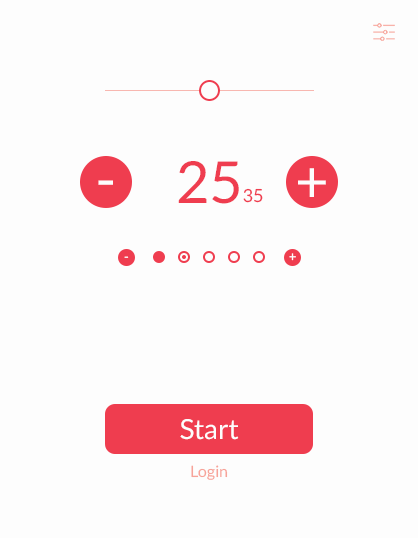
<style>
.page{position:relative;width:418px;height:538px;background:#fdfdfd}
.page>*{position:absolute;margin:0}
.t1{font:58px "Lato-Regular";color:#ef3d4f}
.t2{font:58px "Lato-Regular";color:#fdfdfd}
.t3{font:18px "Lato-Regular";color:#ef3d4f}
.t4{font:12.9px "Lato-Regular";color:#fdfdfd}
.t5{font:27.7px "Lato-Regular";color:#fdfdfd}
.t6{font:15.8px "Lato-Regular";color:#f7a399}
</style>
<div class="page">
<p class="t1" style="left:178px;top:161px;width:61px;height:43px">25</p>
<p class="t2" style="left:298px;top:168px;width:28px;height:29px">+</p>
<p class="t2" style="left:98px;top:180px;width:15px;height:5px">-</p>
<p class="t3" style="left:243px;top:188px;width:20px;height:15px">35</p>
<p class="t4" style="left:124px;top:256px;width:5px;height:2px">-</p>
<p class="t4" style="left:289px;top:253px;width:7px;height:8px">+</p>
<p class="t5" style="left:180px;top:419px;width:59px;height:21px">Start</p>
<p class="t6" style="left:191px;top:465px;width:37px;height:15px">Login</p>
</div>
